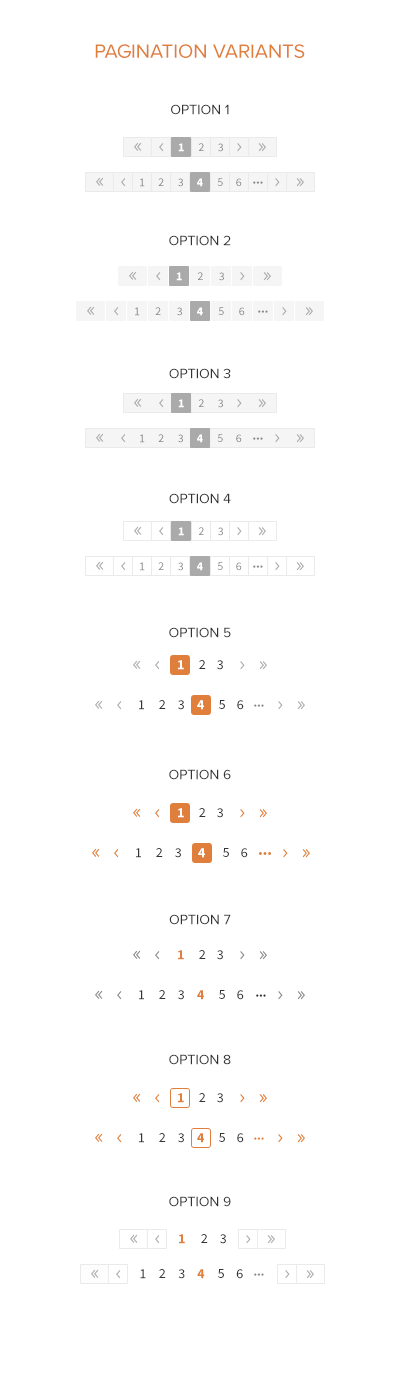
<style>
.page{position:relative;width:400px;height:1380px;background:#ffffff}
.page>*{position:absolute;margin:0}
.t1{font:20px "ProximaNovaA-Regular";color:#e07e3c;text-transform:uppercase}
.t2{font:14px "ProximaNovaA-Regular";color:#333333;text-transform:uppercase}
.t3{font:12px "SourceSansPro-Bold";color:#ffffff}
.t4{font:12px "SourceSansPro-Regular";color:#888888}
.t5{font:12px "SourceSansPro-Semibold";color:#888888}
.t6{font:12px "SourceSansPro-Regular"}
.t7{font:14px "SourceSansPro-Bold";color:#ffffff}
.t8{font:14px "SourceSansPro-Regular";color:#333333}
.t9{font:14px "SourceSansPro-Semibold";color:#333333}
.t10{font:14px "SourceSansPro-Bold";color:#e07e3c}
.t11{font:14px "SourceSansPro-Regular"}
</style>
<div class="page">
<p class="t1" style="left:95px;top:44px;width:210px;height:14px">Pagination Variants</p>
<p class="t2" style="left:171px;top:104px;width:58px;height:11px">option 1</p>
<p class="t3" style="left:178px;top:143px;width:6px;height:9px">1</p>
<p class="t4" style="left:198px;top:143px;width:6px;height:8px"><span class="t5">     </span>2</p>
<p class="t4" style="left:218px;top:143px;width:5px;height:9px">3</p>
<p class="t4" style="left:140px;top:178px;width:5px;height:9px">1</p>
<p class="t4" style="left:158px;top:178px;width:6px;height:8px">2</p>
<p class="t4" style="left:178px;top:178px;width:5px;height:9px">3</p>
<p class="t3" style="left:197px;top:178px;width:6px;height:9px">4</p>
<p class="t6" style="left:217px;top:178px;width:6px;height:8px">5</p>
<p class="t4" style="left:236px;top:178px;width:6px;height:9px">6</p>
<p class="t2" style="left:169px;top:235px;width:62px;height:11px">option 2</p>
<p class="t3" style="left:176px;top:272px;width:6px;height:9px">1</p>
<p class="t4" style="left:197px;top:272px;width:6px;height:8px"><span class="t5">     </span>2</p>
<p class="t4" style="left:219px;top:272px;width:5px;height:9px">3</p>
<p class="t4" style="left:135px;top:307px;width:5px;height:9px">1</p>
<p class="t4" style="left:155px;top:307px;width:6px;height:8px">2</p>
<p class="t4" style="left:177px;top:307px;width:5px;height:9px">3</p>
<p class="t3" style="left:197px;top:307px;width:6px;height:9px">4</p>
<p class="t6" style="left:218px;top:307px;width:6px;height:8px">5</p>
<p class="t4" style="left:239px;top:307px;width:6px;height:9px">6</p>
<p class="t2" style="left:169px;top:368px;width:62px;height:11px">option 3</p>
<p class="t3" style="left:178px;top:399px;width:6px;height:9px">1</p>
<p class="t4" style="left:198px;top:399px;width:6px;height:8px"><span class="t5">     </span>2</p>
<p class="t4" style="left:218px;top:399px;width:5px;height:9px">3</p>
<p class="t4" style="left:140px;top:434px;width:5px;height:9px">1</p>
<p class="t4" style="left:158px;top:434px;width:6px;height:8px">2</p>
<p class="t4" style="left:178px;top:434px;width:5px;height:9px">3</p>
<p class="t3" style="left:197px;top:434px;width:6px;height:9px">4</p>
<p class="t6" style="left:217px;top:434px;width:6px;height:8px">5</p>
<p class="t4" style="left:236px;top:434px;width:6px;height:9px">6</p>
<p class="t2" style="left:169px;top:493px;width:62px;height:11px">option 4</p>
<p class="t3" style="left:178px;top:527px;width:6px;height:9px">1</p>
<p class="t4" style="left:198px;top:527px;width:6px;height:8px"><span class="t5">     </span>2</p>
<p class="t4" style="left:218px;top:527px;width:5px;height:9px">3</p>
<p class="t6" style="left:140px;top:562px;width:5px;height:9px">1</p>
<p class="t4" style="left:158px;top:562px;width:6px;height:8px">2</p>
<p class="t4" style="left:178px;top:562px;width:5px;height:9px">3</p>
<p class="t3" style="left:197px;top:562px;width:6px;height:9px">4</p>
<p class="t6" style="left:217px;top:562px;width:6px;height:8px">5</p>
<p class="t4" style="left:236px;top:562px;width:6px;height:9px">6</p>
<p class="t2" style="left:169px;top:627px;width:62px;height:11px">option 5</p>
<p class="t7" style="left:178px;top:660px;width:6px;height:10px">1</p>
<p class="t8" style="left:199px;top:660px;width:7px;height:9px"><span class="t9">     </span>2</p>
<p class="t8" style="left:217px;top:660px;width:6px;height:10px">3</p>
<p class="t8" style="left:139px;top:700px;width:5px;height:10px">1</p>
<p class="t8" style="left:159px;top:700px;width:7px;height:9px"><span class="t9">     </span>2</p>
<p class="t8" style="left:178px;top:700px;width:6px;height:10px">3</p>
<p class="t7" style="left:197px;top:700px;width:7px;height:10px">4</p>
<p class="t8" style="left:219px;top:700px;width:6px;height:9px"><span class="t9">     </span>5</p>
<p class="t8" style="left:237px;top:700px;width:7px;height:10px">6</p>
<p class="t2" style="left:169px;top:769px;width:62px;height:11px">option 6</p>
<p class="t7" style="left:178px;top:808px;width:6px;height:10px">1</p>
<p class="t8" style="left:199px;top:808px;width:7px;height:9px"><span class="t9">     </span>2</p>
<p class="t8" style="left:217px;top:808px;width:6px;height:10px">3</p>
<p class="t8" style="left:136px;top:848px;width:5px;height:10px">1</p>
<p class="t8" style="left:156px;top:848px;width:7px;height:9px"><span class="t9">     </span>2</p>
<p class="t8" style="left:175px;top:848px;width:6px;height:10px">3</p>
<p class="t7" style="left:198px;top:848px;width:7px;height:10px">4</p>
<p class="t8" style="left:223px;top:848px;width:6px;height:9px"><span class="t9">     </span>5</p>
<p class="t8" style="left:241px;top:848px;width:7px;height:10px">6</p>
<p class="t2" style="left:169px;top:914px;width:62px;height:11px">option 7</p>
<p class="t10" style="left:178px;top:950px;width:6px;height:10px">1</p>
<p class="t8" style="left:199px;top:950px;width:7px;height:9px"><span class="t9">     </span>2</p>
<p class="t8" style="left:217px;top:950px;width:6px;height:10px">3</p>
<p class="t8" style="left:139px;top:990px;width:5px;height:10px">1</p>
<p class="t8" style="left:159px;top:990px;width:7px;height:9px"><span class="t9">     </span>2</p>
<p class="t8" style="left:178px;top:990px;width:6px;height:10px">3</p>
<p class="t10" style="left:197px;top:990px;width:7px;height:10px">4</p>
<p class="t8" style="left:219px;top:990px;width:6px;height:9px"><span class="t9">     </span>5</p>
<p class="t8" style="left:237px;top:990px;width:7px;height:10px">6</p>
<p class="t2" style="left:169px;top:1054px;width:62px;height:11px">option 8</p>
<p class="t10" style="left:178px;top:1093px;width:6px;height:10px">1</p>
<p class="t8" style="left:199px;top:1093px;width:7px;height:9px"><span class="t9">     </span>2</p>
<p class="t8" style="left:217px;top:1093px;width:6px;height:10px">3</p>
<p class="t8" style="left:139px;top:1133px;width:5px;height:10px">1</p>
<p class="t8" style="left:159px;top:1133px;width:7px;height:9px"><span class="t9">     </span>2</p>
<p class="t8" style="left:178px;top:1133px;width:6px;height:10px">3</p>
<p class="t10" style="left:197px;top:1133px;width:7px;height:10px">4</p>
<p class="t8" style="left:219px;top:1133px;width:6px;height:9px"><span class="t9">     </span>5</p>
<p class="t8" style="left:237px;top:1133px;width:7px;height:10px">6</p>
<p class="t2" style="left:169px;top:1196px;width:62px;height:11px">option 9</p>
<p class="t10" style="left:179px;top:1234px;width:6px;height:10px">1</p>
<p class="t8" style="left:201px;top:1234px;width:7px;height:9px"><span class="t9">     </span>2</p>
<p class="t8" style="left:220px;top:1234px;width:6px;height:10px">3</p>
<p class="t11" style="left:140px;top:1269px;width:6px;height:10px">1</p>
<p class="t8" style="left:159px;top:1269px;width:7px;height:9px">2</p>
<p class="t8" style="left:178px;top:1269px;width:7px;height:10px">3</p>
<p class="t10" style="left:197px;top:1269px;width:8px;height:10px">4</p>
<p class="t8" style="left:218px;top:1269px;width:6px;height:9px">5</p>
<p class="t8" style="left:236px;top:1269px;width:7px;height:10px">6</p>
</div>
